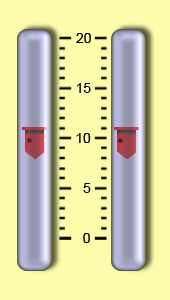
<style>
.page{position:relative;width:170px;height:300px;background:#fcfcaa}
.page>*{position:absolute;margin:0}
.t1{font:14px "ArialMT";color:#040404}
</style>
<div class="page">
<p class="t1" style="left:76px;top:33px;width:15px;height:10px">20</p>
<p class="t1" style="left:76px;top:83px;width:15px;height:10px">15</p>
<p class="t1" style="left:76px;top:133px;width:15px;height:10px">10</p>
<p class="t1" style="left:83px;top:183px;width:8px;height:10px">5</p>
<p class="t1" style="left:83px;top:233px;width:7px;height:10px">0</p>
</div>
